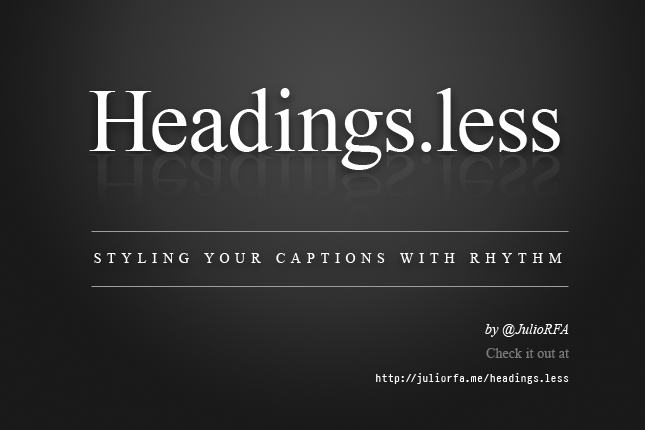
<style>
.page{position:relative;width:645px;height:430px}
.page>*{position:absolute;margin:0}
.t1{font:90px "TimesNewRomanPSMT";color:#ffffff}
.t2{font:14px "TimesNewRomanPSMT";letter-spacing:0.42em;color:#ffffff;text-transform:uppercase}
.t3{font:11px/24px "Pragmata-Medium";letter-spacing:0.01em;color:#ffffff}
.t4{font:14px/24px "TimesNewRomanPS-ItalicMT";letter-spacing:0.01em;color:#ffffff}
.t5{font:14px/24px "TimesNewRomanPSMT";letter-spacing:0.01em;color:#7a7a7a}
</style>
<div class="page">
<p class="t1" style="left:89px;top:88px;width:471px;height:82px">Headings.less</p>
<p class="t2" style="left:94px;top:253px;width:468px;height:10px">Styling Your Captions With Rhythm</p>
<p class="t3" style="left:376px;top:324px;width:193px;height:60px;text-align:right"><span class="t4">by @JulioRFA<br></span><span class="t5">Check it out at </span>http://juliorfa.me/headings.less</p>
</div>
